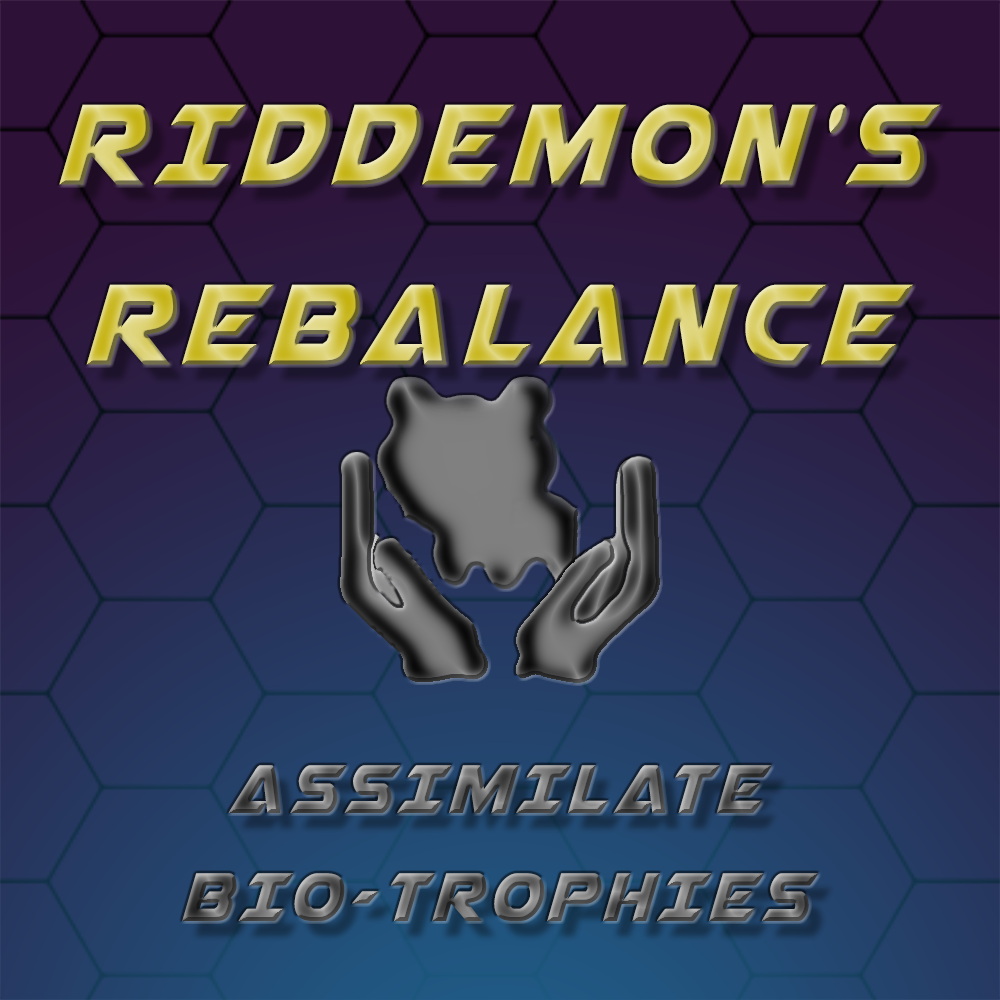
<style>
.page{position:relative;width:1000px;height:1000px}
.page>*{position:absolute;margin:0}
.t1{font:150px "AirstrikeCondensed";letter-spacing:0.08em;text-transform:uppercase}
.t2{font:90px "AirstrikeCondensed";letter-spacing:0.08em;text-transform:uppercase}
</style>
<div class="page">
<p class="t1" style="left:59px;top:104px;width:882px;height:261px;text-align:center">Riddemon's<br>Rebalance</p>
<p class="t2" style="left:182px;top:765px;width:637px;height:156px;text-align:center">Assimilate<br>Bio-Trophies</p>
</div>
